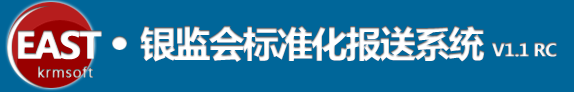
<style>
.page{position:relative;width:574px;height:92px;background:#006699}
.page>*{position:absolute;margin:0}
.t1{font:36px "MicrosoftYaHei-Bold";letter-spacing:-0.075em;font-weight:bold}
.t2{font:18px "MicrosoftYaHei-Bold";letter-spacing:-0.075em;font-weight:bold}
</style>
<div class="page">
<p class="t1" style="left:140px;top:25px;width:417px;height:37px">银监会标准化报送系统 <span class="t2">V1.1 RC</span></p>
</div>
